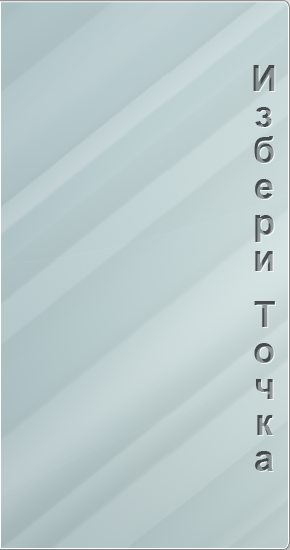
<style>
.page{position:relative;width:290px;height:550px}
.page>*{position:absolute;margin:0}
.t1{font:36px/33.7px "Arial-BoldMT"}
</style>
<div class="page">
<p class="t1" style="left:253px;top:65px;width:22px;height:406px;text-align:center">Избери  Точка</p>
</div>
